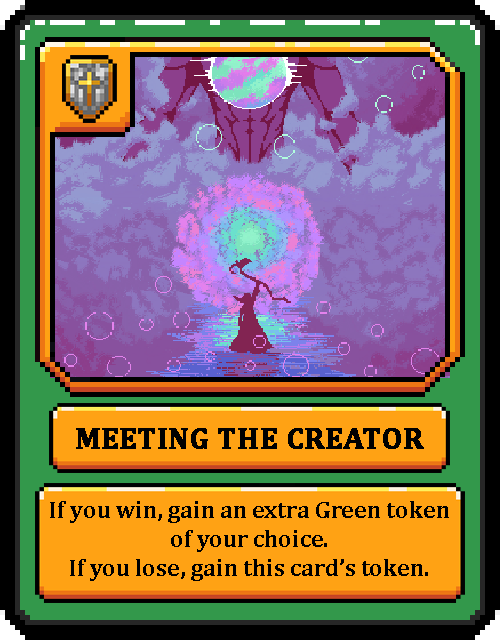
<style>
.page{position:relative;width:500px;height:640px;background:#000000}
.page>*{position:absolute;margin:0}
.t1{font:30px "Cambria-Bold";color:#000000;text-transform:uppercase;font-weight:bold}
.t2{font:24px "Cambria-Bold";color:#000000}
</style>
<div class="page">
<p class="t1" style="left:76px;top:428px;width:348px;height:21px">Meeting the Creator</p>
<p class="t2" style="left:50px;top:501px;width:399px;height:80px;text-align:center">If you win, gain an extra Green token of your choice.<br>If you lose, gain this card’s token.</p>
</div>
